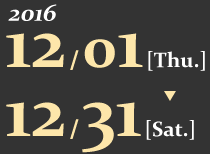
<style>
.page{position:relative;width:210px;height:154px;background:#333333}
.page>*{position:absolute;margin:0}
.t1{font:24px "Constantia-Bold";color:#ffffff;font-style:italic}
.t2{font:21px "Constantia-Bold";color:#ffffff}
.t3{font:72px "Constantia-Bold";color:#fde6aa}
.t4{font:24px "Constantia-Bold";color:#fde6aa;font-weight:bold}
.t5{font:60px "Constantia-Bold";color:#fde6aa}
</style>
<div class="page">
<p class="t1" style="left:8px;top:4px;width:49px;height:17px">2016</p>
<p class="t2" style="left:6px;top:33px;width:199px;height:38px"><span class="t3">12 </span><span class="t4">/ </span><span class="t5">0</span><span class="t3">1 </span>[Thu.]</p>
<p class="t2" style="left:6px;top:102px;width:188px;height:51px"><span class="t3">12 </span><span class="t4">/ </span><span class="t3">31 </span>[Sat.]</p>
</div>
